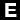
<style>
.page{position:relative;width:20px;height:20px;background:#000000}
.page>*{position:absolute;margin:0}
.t1{font:20px "HelveticaNeue-Bold";color:#ffffff}
</style>
<div class="page">
<p class="t1" style="left:5px;top:3px;width:12px;height:14px">E</p>
</div>
